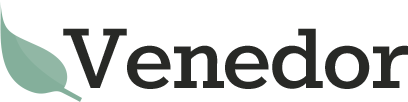
<style>
.page{position:relative;width:408px;height:102px;background:#ffffff}
.page>*{position:absolute;margin:0}
.t1{font:100px "Rokkitt-Bold";letter-spacing:-0.025em;color:#282926}
</style>
<div class="page">
<p class="t1" style="left:63px;top:28px;width:346px;height:61px">Venedor</p>
</div>
